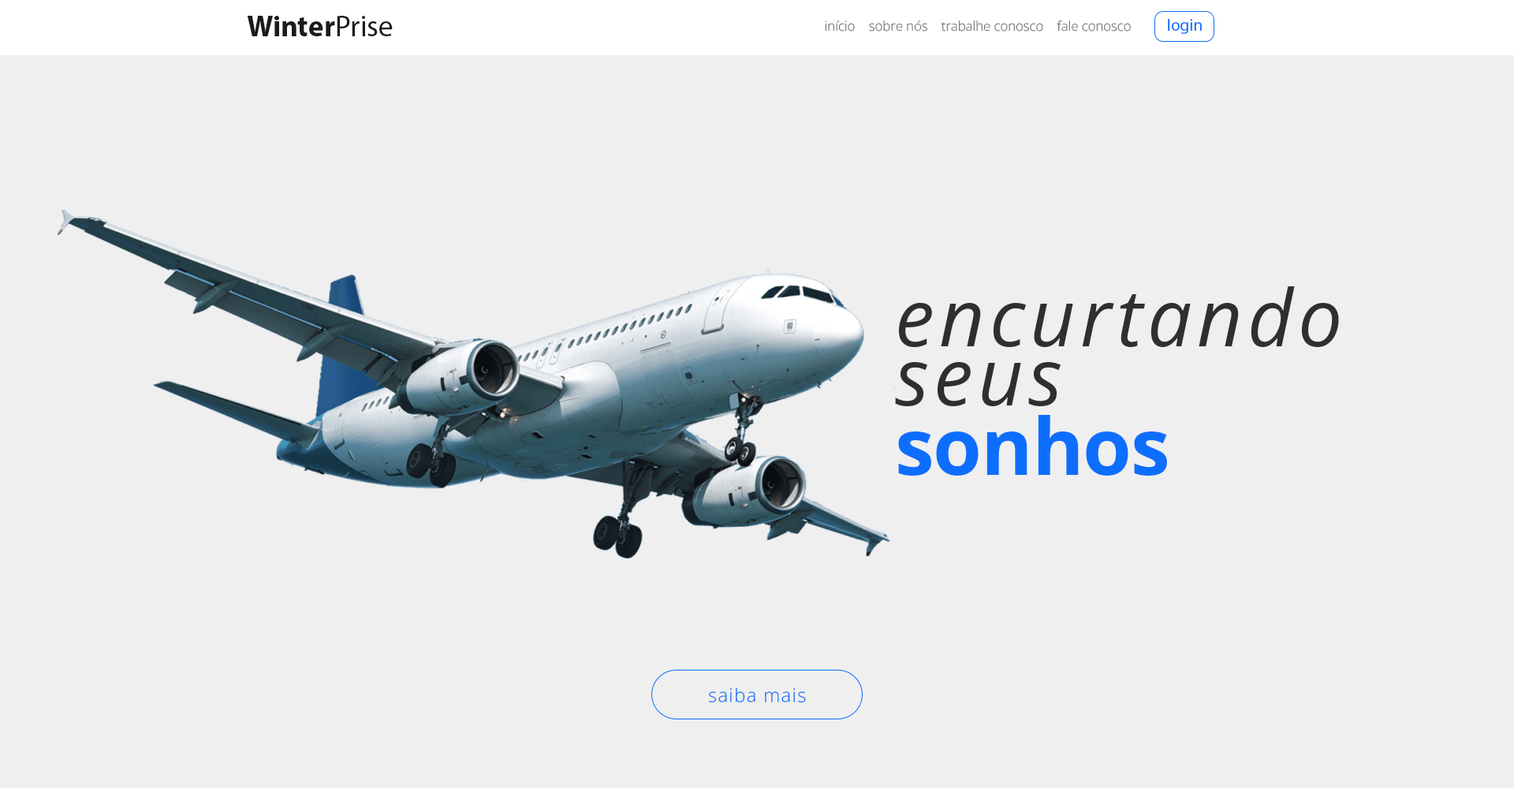
<style>
.page{position:relative;width:1514px;height:788px;background:#efefef}
.page>*{position:absolute;margin:0}
.t1{font:29.5px "MyriadPro-Bold";color:#1b1b1b}
.t2{font:29.5px "MyriadPro-Regular";color:#1b1b1b}
.t3{font:13.1px "OpenSans-Light";color:#6f6f6f}
.t4{font:16.8px "MyriadPro-Regular";color:#0d6efd}
.t5{font:79.2px/59.1px "OpenSans-Italic";letter-spacing:0.06em;color:#2f2f2f}
.t6{font:79.2px/69px "OpenSans-Bold";letter-spacing:-0.015em;color:#0d6efd}
.t7{font:18.7px "OpenSans-Light";letter-spacing:0.06em;color:#0d6efd}
</style>
<div class="page">
<p class="t1" style="left:247px;top:16px;width:146px;height:20px">Winter<span class="t2">Prise</span></p>
<p class="t3" style="left:825px;top:21px;width:306px;height:11px">início    sobre nós    trabalhe conosco    fale conosco</p>
<p class="t4" style="left:1168px;top:19px;width:34px;height:15px">login</p>
<p class="t5" style="left:895px;top:286px;width:444px;height:189px">encurtando<br>seus<br><span class="t6">sonhos</span></p>
<p class="t7" style="left:708px;top:687px;width:98px;height:16px">saiba mais</p>
</div>
